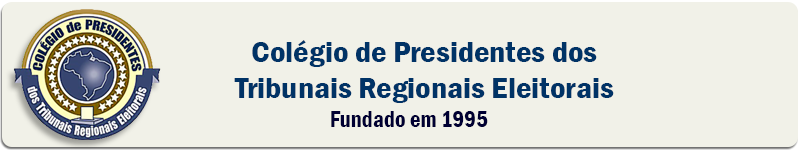
<style>
.page{position:relative;width:800px;height:150px;background:#f1f1e8}
.page>*{position:absolute;margin:0}
.t1{font:30px/36.1px "FranklinGothic-DemiCond";color:#003366;scale:1.13 1}
.t2{font:23.1px "FranklinGothic-DemiCond";color:#000033}
</style>
<div class="page">
<p class="t1" style="left:234px;top:40px;width:380px;height:63px;text-align:center">Colégio de Presidentes dos<br>Tribunais Regionais Eleitorais</p>
<p class="t2" style="left:331px;top:111px;width:157px;height:16px">Fundado em 1995</p>
</div>
